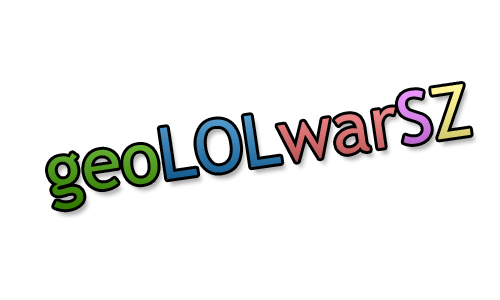
<style>
.page{position:relative;width:500px;height:300px;background:#ffffff}
.page>*{position:absolute;margin:0}
.t1{font:72px "TrebuchetMS"}
</style>
<div class="page">
<p class="t1" style="left:48px;top:84px;width:423px;height:126px;rotate:-8deg">geoLOLwarSZ</p>
</div>
